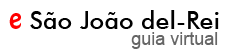
<style>
.page{position:relative;width:231px;height:50px;background:#ffffff}
.page>*{position:absolute;margin:0}
.t1{font:24.7px "FuturaBT-Medium";color:#000000}
.t2{font:24.7px "HoboStd";color:#ff0000}
.t3{font:18px "ArialMT";color:#666666}
</style>
<div class="page">
<p class="t1" style="left:9px;top:10px;width:210px;height:19px"><span class="t2">  e </span>São João del-Rei</p>
<p class="t3" style="left:131px;top:32px;width:87px;height:17px">guia virtual</p>
</div>
